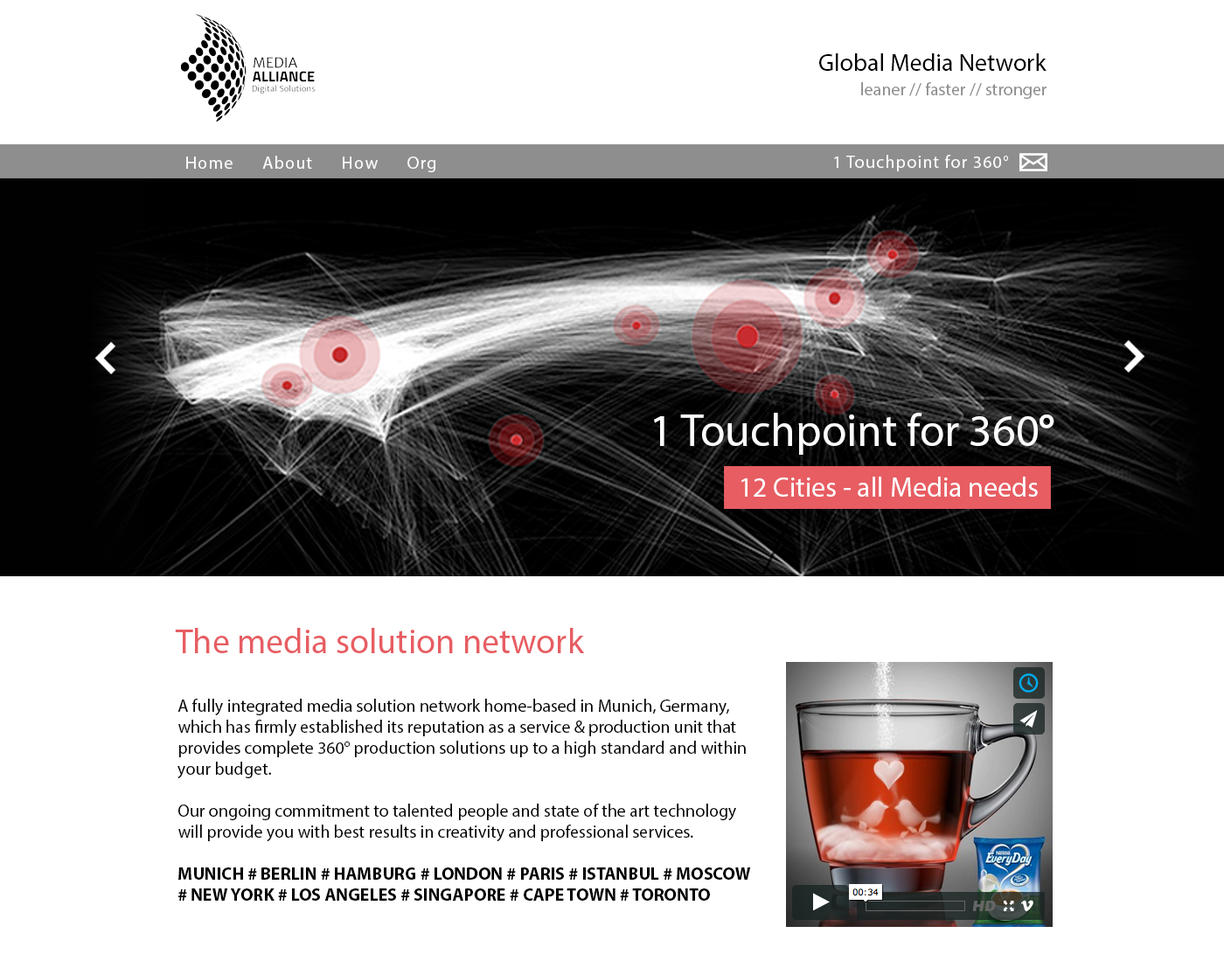
<style>
.page{position:relative;width:1224px;height:975px;background:#ffffff}
.page>*{position:absolute;margin:0}
.t1{font:24.5px "MyriadPro-Regular";color:#000000}
.t2{font:17.5px "MyriadPro-Regular";color:#8d8d8d}
.t3{font:17.5px "MyriadPro-Regular";letter-spacing:0.06em;color:#ffffff}
.t4{font:45.4px "MyriadPro-Regular";color:#ffffff}
.t5{font:45.4px "MyriadPro-Bold";color:#ffffff}
.t6{font:28px "MyriadPro-Regular";color:#ffffff}
.t7{font:35px "MyriadPro-Regular";color:#e75d62}
.t8{font:17.5px "MyriadPro-Regular";color:#000000}
.t9{font:17.5px "MyriadPro-Bold";color:#000000}
</style>
<div class="page">
<p class="t1" style="left:819px;top:53px;width:227px;height:18px">Global Media Network</p>
<p class="t2" style="left:861px;top:82px;width:185px;height:17px">leaner // faster // stronger</p>
<p class="t3" style="left:186px;top:156px;width:249px;height:16px">Home      About      How      Org</p>
<p class="t3" style="left:834px;top:155px;width:174px;height:16px">1 Touchpoint for 360°</p>
<p class="t4" style="left:654px;top:413px;width:400px;height:41px">1 Touchpoint for 360<span class="t5">°</span></p>
<p class="t6" style="left:741px;top:476px;width:296px;height:20px">12 Cities - all Media needs</p>
<p class="t7" style="left:175px;top:628px;width:410px;height:25px">The media solution network</p>
<p class="t8" style="left:177px;top:698px;width:574px;height:202px">A fully integrated media solution network home-based in Munich, Germany, which has firmly established its reputation as a service &amp; production unit that provides complete 360° production solutions up to a high standard and within your budget.<br><br>Our ongoing commitment to talented people and state of the art technology will provide you with best results in creativity and professional services.<br><br><span class="t9">MUNICH # BERLIN # HAMBURG # LONDON # PARIS # ISTANBUL # MOSCOW # NEW YORK # LOS ANGELES # SINGAPORE # CAPE TOWN # TORONTO<br></span><br><br>EDIAALLIANCE is thrilled to have a celebrated talent and visionary like Kat joining the network.</p>
</div>
